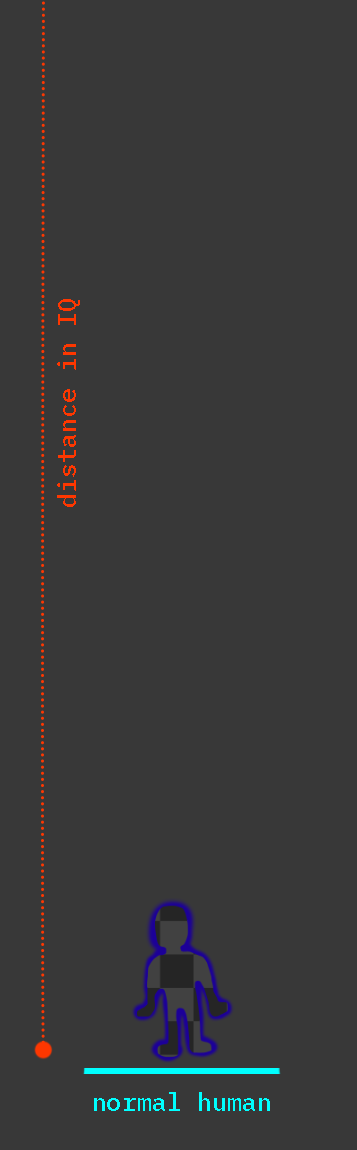
<style>
.page{position:relative;width:357px;height:1150px;background:#383838}
.page>*{position:absolute;margin:0}
.t1{font:25px "IBMPlexMono-Medium";letter-spacing:0.005em;color:#fe3700}
.t2{font:25px "IBMPlexMono-Medium";letter-spacing:0.005em;color:#00ffff}
</style>
<div class="page">
<p class="t1" style="left:57px;top:299px;width:23px;height:208px;rotate:-90deg">distance in IQ</p>
<p class="t2" style="left:94px;top:1092px;width:176px;height:19px">normal human</p>
</div>
